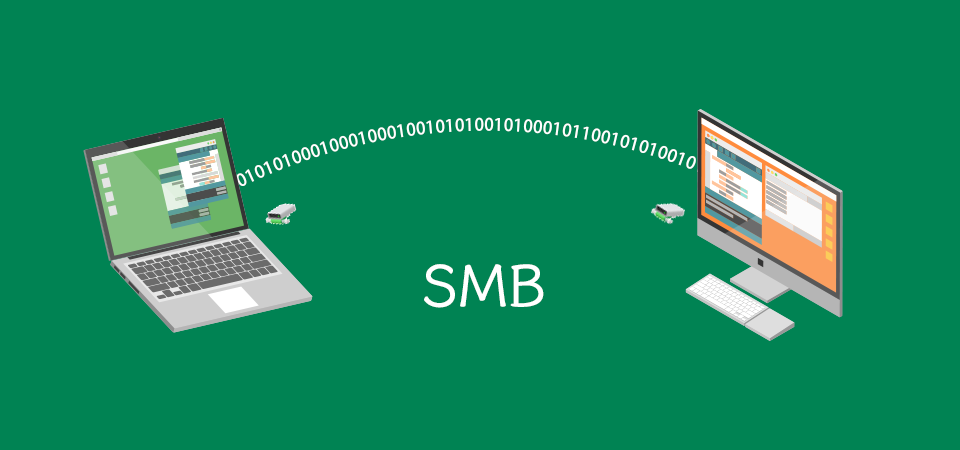
<style>
.page{position:relative;width:960px;height:450px;background:#008353}
.page>*{position:absolute;margin:0}
.t1{font:16.7px "AdobeHeitiStd-Regular";color:#ffffff}
.t2{font:58.3px "LXGWWenKai-Bold";color:#ffffff}
</style>
<div class="page">
<p class="t1" style="left:236px;top:117px;width:468px;height:69px;rotate:-2deg">0101010001000100010010101001010001011001010100101</p>
<p class="t2" style="left:424px;top:264px;width:120px;height:44px">SMB</p>
</div>
